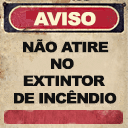
<style>
.page{position:relative;width:128px;height:128px}
.page>*{position:absolute;margin:0}
.t1{font:18px "Arial-Black";letter-spacing:-0.04em;color:#fbf5cf;scale:1.06 1}
.t2{font:14.4px "Arial-Black";letter-spacing:-0.048em;color:#101010;scale:1.06 1}
.t3{font:14.4px "Arial-Black";letter-spacing:-0.06em;color:#101010;scale:1.06 1}
.t4{font:14.4px "Arial-Black";letter-spacing:-0.05em;color:#101010;scale:1.06 1}
.t5{font:14.4px "Arial-Black";letter-spacing:-0.055em;color:#101010;scale:1.06 1}
</style>
<div class="page">
<p class="t1" style="left:33px;top:12px;width:63px;height:14px">AVISO</p>
<p class="t2" style="left:23px;top:39px;width:86px;height:14px">NÃO ATIRE</p>
<p class="t3" style="left:51px;top:58px;width:23px;height:11px">NO</p>
<p class="t4" style="left:23px;top:75px;width:82px;height:11px">EXTINTOR</p>
<p class="t5" style="left:14px;top:90px;width:103px;height:14px">DE INCÊNDIO</p>
</div>
